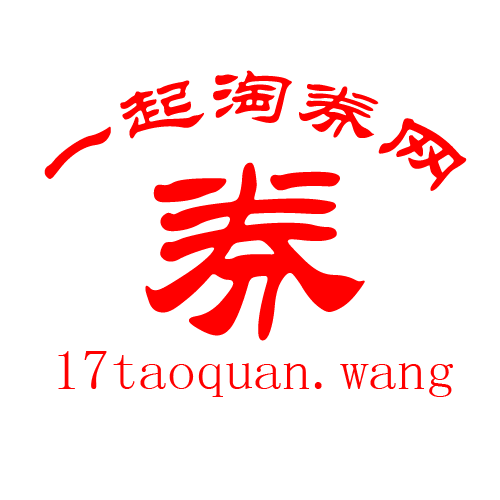
<style>
.page{position:relative;width:500px;height:500px;background:#ffffff}
.page>*{position:absolute;margin:0}
.t1{font:72px "STLiti";color:#ff0000}
.t2{font:247.2px "STLiti";color:#ff0000}
.t3{font:57.5px "YouYuan";color:#ff0000}
</style>
<div class="page">
<p class="t1" style="left:44px;top:70px;width:423px;height:121px">一起淘券网</p>
<p class="t2" style="left:145px;top:162px;width:220px;height:179px">券</p>
<p class="t3" style="left:58px;top:351px;width:395px;height:46px">17taoquan.wang</p>
</div>
